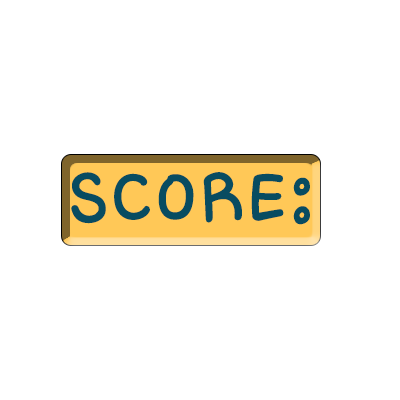
<style>
.page{position:relative;width:400px;height:400px;background:#ffffff}
.page>*{position:absolute;margin:0}
.t1{font:66.7px "Chococooky";letter-spacing:0.06em;color:#084c61;font-weight:bold}
</style>
<div class="page">
<p class="t1" style="left:71px;top:172px;width:239px;height:53px">SCORE:</p>
</div>
